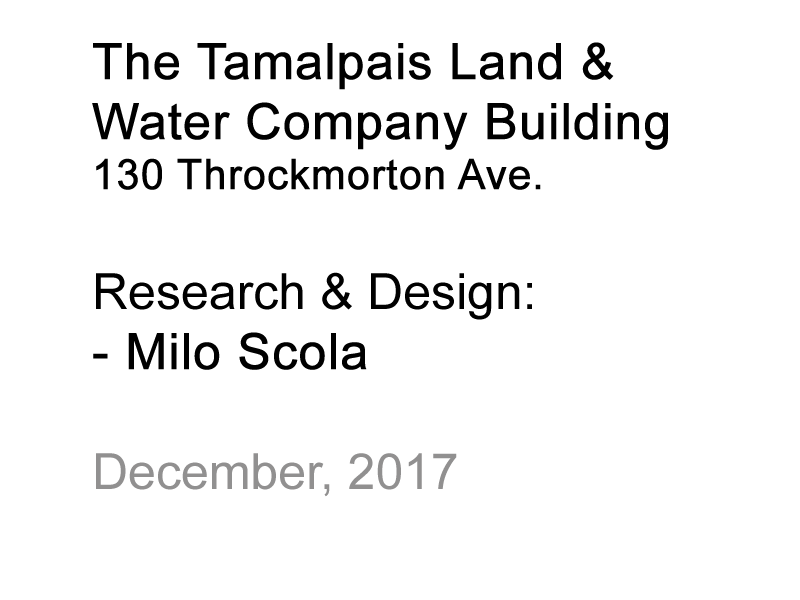
<style>
.page{position:relative;width:800px;height:600px;background:#ffffff}
.page>*{position:absolute;margin:0}
.t1{font:50px "ArialMT";color:#000000;font-weight:bold}
.t2{font:41.7px "ArialMT";color:#000000;font-weight:bold}
.t3{font:50px "ArialMT";color:#000000}
.t4{font:50px "ArialMT";color:#919090}
</style>
<div class="page">
<p class="t1" style="left:92px;top:42px;width:576px;height:455px">The Tamalpais Land &amp;<br>Water Company Building<br><span class="t2">130 Throckmorton Ave.<br></span><span class="t3"><br>Research &amp; Design:<br></span>- Milo Scola<br><br><span class="t4">December, 2017</span></p>
</div>
